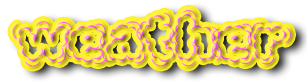
<style>
.page{position:relative;width:307px;height:82px;background:#ffffff}
.page>*{position:absolute;margin:0}
.t1{font:60px "RubikPuddles-Regular"}
</style>
<div class="page">
<p class="t1" style="left:12px;top:10px;width:279px;height:57px">weather</p>
</div>
